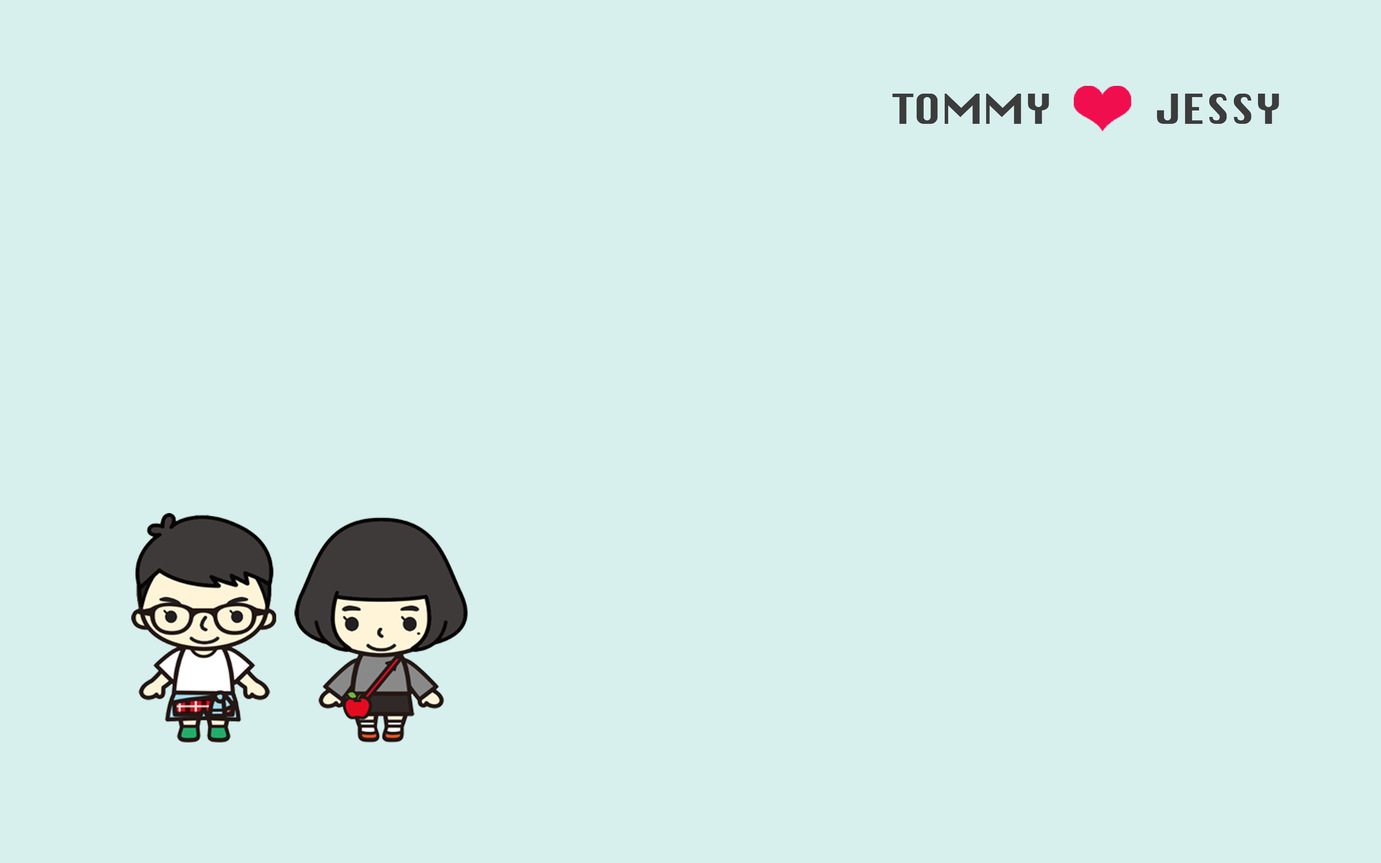
<style>
.page{position:relative;width:1381px;height:863px;background:#d7f0ee}
.page>*{position:absolute;margin:0}
.t1{font:40.2px "Silom";color:#3c3c3c;scale:1.04 1}
</style>
<div class="page">
<p class="t1" style="left:893px;top:94px;width:386px;height:30px">TOMMY          JESSY</p>
</div>
